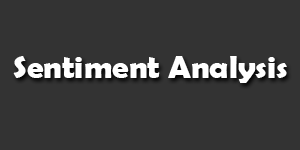
<style>
.page{position:relative;width:300px;height:150px;background:#333333}
.page>*{position:absolute;margin:0}
.t1{font:32.5px "BerlinSansFBDemi-Bold";color:#ffffff}
</style>
<div class="page">
<p class="t1" style="left:13px;top:56px;width:274px;height:27px">Sentiment Analysis</p>
</div>
